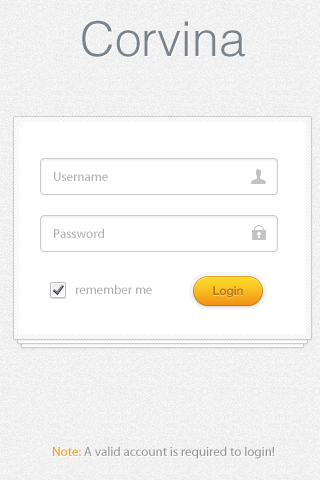
<style>
.page{position:relative;width:320px;height:480px;background:#ffffff}
.page>*{position:absolute;margin:0}
.t1{font:48px "HelveticaLTStd-Light";color:#7a838c}
.t2{font:48px "HelveticaLTStd-Light"}
.t3{font:13px "MyriadPro-Regular";color:#aeaeae}
.t4{font:12px "HelveticaNeue-Medium";color:#b66b00}
.t5{font:13px "MyriadPro-Regular";color:#959595}
.t6{font:13px "MyriadPro-Regular";color:#f39d1a}
</style>
<div class="page">
<p class="t1" style="left:82px;top:20px;width:163px;height:37px">Corvina</p>
<p class="t2" style="left:83px;top:21px;width:163px;height:37px">Corvina</p>
<p class="t3" style="left:54px;top:172px;width:54px;height:9px">Username</p>
<p class="t3" style="left:54px;top:228px;width:50px;height:10px">Password</p>
<p class="t3" style="left:76px;top:284px;width:76px;height:10px">remember me</p>
<p class="t4" style="left:213px;top:286px;width:30px;height:12px">Login</p>
<p class="t5" style="left:53px;top:446px;width:222px;height:13px"><span class="t6">Note: </span>A valid account is required to login!</p>
</div>
